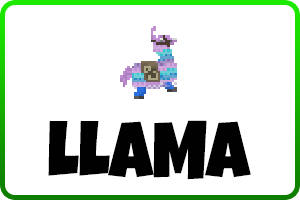
<style>
.page{position:relative;width:300px;height:200px;background:#ffffff}
.page>*{position:absolute;margin:0}
.t1{font:80.5px "LuckiestGuy-Regular";letter-spacing:-0.01em;color:#010101;text-transform:uppercase;scale:0.87 1}
</style>
<div class="page">
<p class="t1" style="left:48px;top:120px;width:203px;height:60px">llama</p>
</div>
